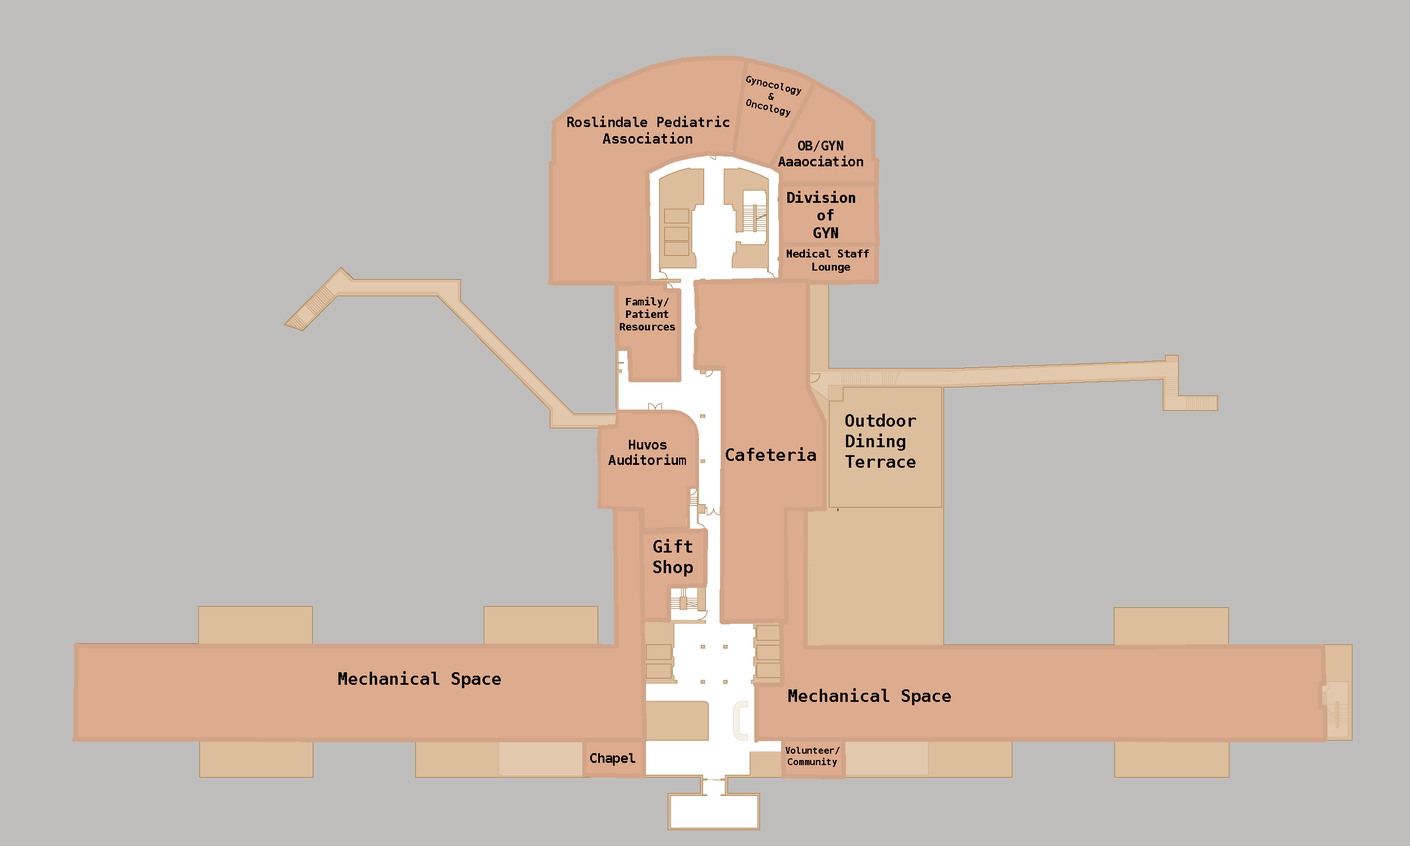
<style>
.page{position:relative;width:1410px;height:846px;background:#bfbdbb}
.page>*{position:absolute;margin:0}
.t1{font:9.6px "Menlo-Bold";color:#000000}
.t2{font:13.7px "Menlo-Bold";color:#000000}
.t3{font:13px "Menlo-Bold";color:#000000}
.t4{font:14.8px "Menlo-Bold";color:#000000}
.t5{font:10.7px "Menlo-Bold";color:#000000}
.t6{font:10.4px "Menlo-Bold";color:#000000}
.t7{font:17.1px "Menlo-Bold";color:#000000}
.t8{font:12.9px "Menlo-Bold";color:#000000}
.t9{font:9.2px "Menlo-Bold";color:#000000}
</style>
<div class="page">
<p class="t1" style="left:746px;top:76px;width:55px;height:41px;text-align:center;rotate:13deg">Gynocology<br>&amp;<br>Oncology</p>
<p class="t2" style="left:567px;top:116px;width:162px;height:28px;text-align:center">Roslindale Pediatric<br>Association</p>
<p class="t3" style="left:778px;top:141px;width:85px;height:25px;text-align:center">OB/GYN<br>Aaaociation</p>
<p class="t4" style="left:787px;top:191px;width:68px;height:47px;text-align:center">Division <br>of<br>GYN</p>
<p class="t5" style="left:787px;top:249px;width:82px;height:24px;text-align:center">Medical Staff <br>Lounge</p>
<p class="t6" style="left:620px;top:297px;width:55px;height:33px;text-align:center">Family/<br>Patient<br>Resources</p>
<p class="t7" style="left:845px;top:414px;width:71px;height:54px;text-align:center">Outdoor<br>Dining <br>Terrace</p>
<p class="t8" style="left:608px;top:440px;width:78px;height:25px;text-align:center">Huvos<br>Auditorium</p>
<p class="t7" style="left:726px;top:447px;width:90px;height:14px">Cafeteria</p>
<p class="t7" style="left:653px;top:539px;width:40px;height:37px;text-align:center">Gift<br>Shop</p>
<p class="t7" style="left:338px;top:671px;width:163px;height:17px">Mechanical Space</p>
<p class="t7" style="left:788px;top:688px;width:163px;height:17px">Mechanical Space</p>
<p class="t9" style="left:785px;top:747px;width:55px;height:20px;text-align:center">Volunteer/<br>Community</p>
<p class="t3" style="left:590px;top:753px;width:45px;height:13px">Chapel</p>
</div>
